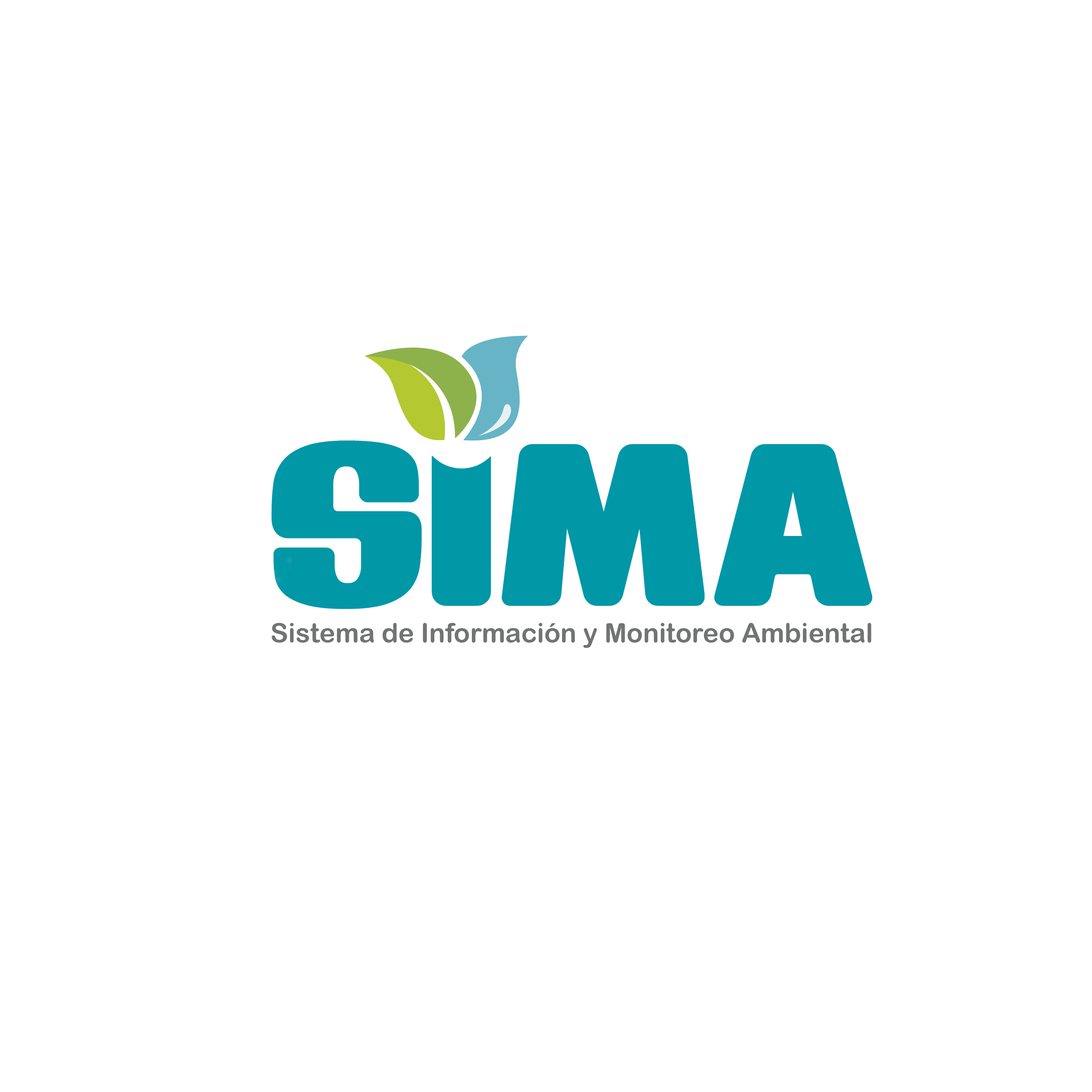
<style>
.page{position:relative;width:1092px;height:1092px;background:#ffffff}
.page>*{position:absolute;margin:0}
.t1{font:26.7px "ArialRoundedMTBold";color:#727474}
</style>
<div class="page">
<p class="t1" style="left:272px;top:623px;width:599px;height:25px">Sistema de Información y Monitoreo Ambiental</p>
</div>
